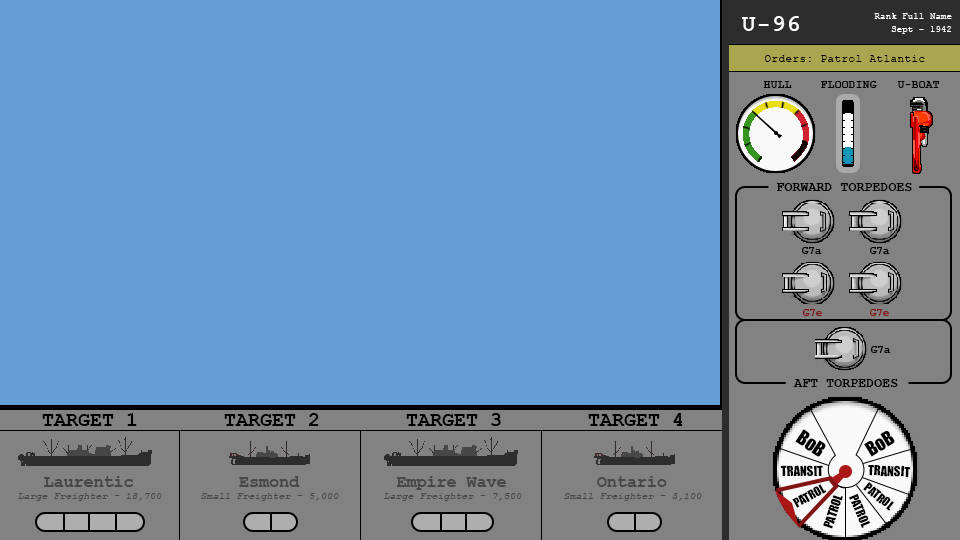
<style>
.page{position:relative;width:960px;height:540px;background:#669ed6}
.page>*{position:absolute;margin:0}
.t1{font:23.5px "CourierNewPS-BoldMT";color:#ffffff}
.t2{font:8.7px/13px "CourierNewPSMT";color:#ffffff}
.t3{font:11px "CourierNewPSMT";color:#000000}
.t4{font:11px "CourierNewPS-BoldMT";color:#000000}
.t5{font:13px "CourierNewPS-BoldMT";color:#000000}
.t6{font:10.5px "CourierNewPS-BoldMT";color:#000000}
.t7{font:10.5px "CourierNewPS-BoldMT";color:#831414}
.t8{font:20px "CourierNewPS-BoldMT";color:#000000}
.t9{font:18.6px "Impact";color:#000000}
.t10{font:12.8px "Impact";color:#000000}
.t11{font:10px "CourierNewPS-ItalicMT";color:#474747}
.t12{font:17px "CourierNewPS-BoldMT";color:#474747}
.t13{font:12px "Impact";color:#000000}
</style>
<div class="page">
<p class="t1" style="left:742px;top:16px;width:57px;height:15px">U-96</p>
<p class="t2" style="left:874px;top:13px;width:78px;height:21px;text-align:right">Rank Full Name<br>Sept - 1942</p>
<p class="t3" style="left:765px;top:55px;width:160px;height:7px">Orders: Patrol Atlantic</p>
<p class="t4" style="left:764px;top:81px;width:28px;height:7px">HULL</p>
<p class="t4" style="left:821px;top:81px;width:56px;height:7px">FLOODING</p>
<p class="t4" style="left:897px;top:81px;width:42px;height:7px">U-BOAT</p>
<p class="t5" style="left:777px;top:183px;width:135px;height:8px">FORWARD TORPEDOES</p>
<p class="t6" style="left:802px;top:247px;width:20px;height:7px">G7a</p>
<p class="t6" style="left:870px;top:247px;width:20px;height:7px">G7a</p>
<p class="t7" style="left:803px;top:309px;width:19px;height:7px">G7e</p>
<p class="t7" style="left:870px;top:309px;width:19px;height:7px">G7e</p>
<p class="t6" style="left:871px;top:346px;width:20px;height:7px">G7a</p>
<p class="t5" style="left:793px;top:379px;width:105px;height:8px">AFT TORPEDOES</p>
<p class="t8" style="left:42px;top:413px;width:95px;height:13px">TARGET 1</p>
<p class="t8" style="left:224px;top:413px;width:95px;height:13px">TARGET 2</p>
<p class="t8" style="left:406px;top:413px;width:95px;height:13px">TARGET 3</p>
<p class="t8" style="left:588px;top:413px;width:95px;height:13px">TARGET 4</p>
<p class="t9" style="left:795px;top:429px;width:31px;height:28px;rotate:34deg">BoB</p>
<p class="t9" style="left:864px;top:431px;width:31px;height:26px;rotate:-31deg">BoB</p>
<p class="t10" style="left:780px;top:465px;width:43px;height:12px;rotate:-1deg">TRANSIT</p>
<p class="t10" style="left:868px;top:465px;width:43px;height:13px;rotate:2deg">TRANSIT</p>
<p class="t11" style="left:18px;top:476px;width:144px;height:25px;text-align:center"><span class="t12">Laurentic<br></span>Large Freighter - 18,700</p>
<p class="t11" style="left:201px;top:476px;width:138px;height:25px;text-align:center"><span class="t12">Esmond<br></span>Small Freighter - 5,000</p>
<p class="t11" style="left:384px;top:476px;width:138px;height:25px;text-align:center"><span class="t12">Empire Wave<br></span>Large Freighter - 7,500</p>
<p class="t11" style="left:564px;top:476px;width:138px;height:25px;text-align:center"><span class="t12">Ontario<br></span>Small Freighter - 3,100</p>
<p class="t13" style="left:792px;top:484px;width:35px;height:24px;rotate:-29deg">PATROL</p>
<p class="t13" style="left:863px;top:482px;width:31px;height:29px;rotate:39deg">PATROL</p>
<p class="t13" style="left:823px;top:495px;width:20px;height:34px;rotate:-71deg">PATROL</p>
<p class="t13" style="left:849px;top:493px;width:21px;height:35px;rotate:67deg">PATROL</p>
</div>
